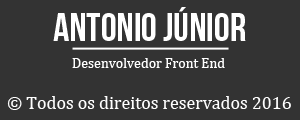
<style>
.page{position:relative;width:300px;height:120px;background:#333333}
.page>*{position:absolute;margin:0}
.t1{font:40px "BebasNeue";color:#ffffff}
.t2{font:14px "Cambria";color:#ffffff}
.t3{font:18px "Cambria";color:#ffffff}
</style>
<div class="page">
<p class="t1" style="left:53px;top:7px;width:193px;height:34px">ANTONIO JÚNIOR</p>
<p class="t2" style="left:72px;top:58px;width:153px;height:10px">Desenvolvedor Front End</p>
<p class="t3" style="left:7px;top:96px;width:284px;height:14px">© Todos os direitos reservados 2016</p>
</div>
